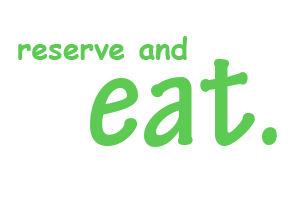
<style>
.page{position:relative;width:306px;height:204px;background:#ffffff}
.page>*{position:absolute;margin:0}
.t1{font:30px "ComicSansMS-Bold";color:#5dca54}
.t2{font:150px "TektonPro-BoldCond";color:#5dca54}
</style>
<div class="page">
<p class="t1" style="left:18px;top:36px;width:169px;height:24px">reserve and</p>
<p class="t2" style="left:90px;top:58px;width:187px;height:89px">eat.</p>
</div>
